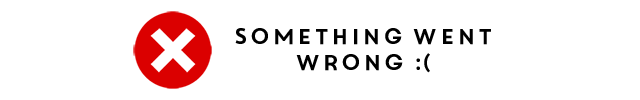
<style>
.page{position:relative;width:640px;height:100px;background:#ffffff}
.page>*{position:absolute;margin:0}
.t1{font:21.7px "CoreCircus";color:#000000}
.t2{font:21.7px "CoreCircus";letter-spacing:-0.2em;color:#000000}
</style>
<div class="page">
<p class="t1" style="left:235px;top:28px;width:256px;height:45px;text-align:center">Something went<br>wrong <span class="t2">:(</span></p>
</div>
